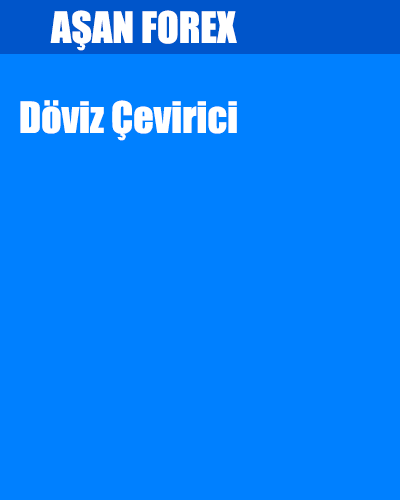
<style>
.page{position:relative;width:400px;height:500px;background:#0080ff}
.page>*{position:absolute;margin:0}
.t1{font:40px "Impact";color:#ffffff}
</style>
<div class="page">
<p class="t1" style="left:50px;top:10px;width:187px;height:41px">AŞAN FOREX</p>
<p class="t1" style="left:20px;top:100px;width:217px;height:41px">Döviz Çevirici</p>
</div>
